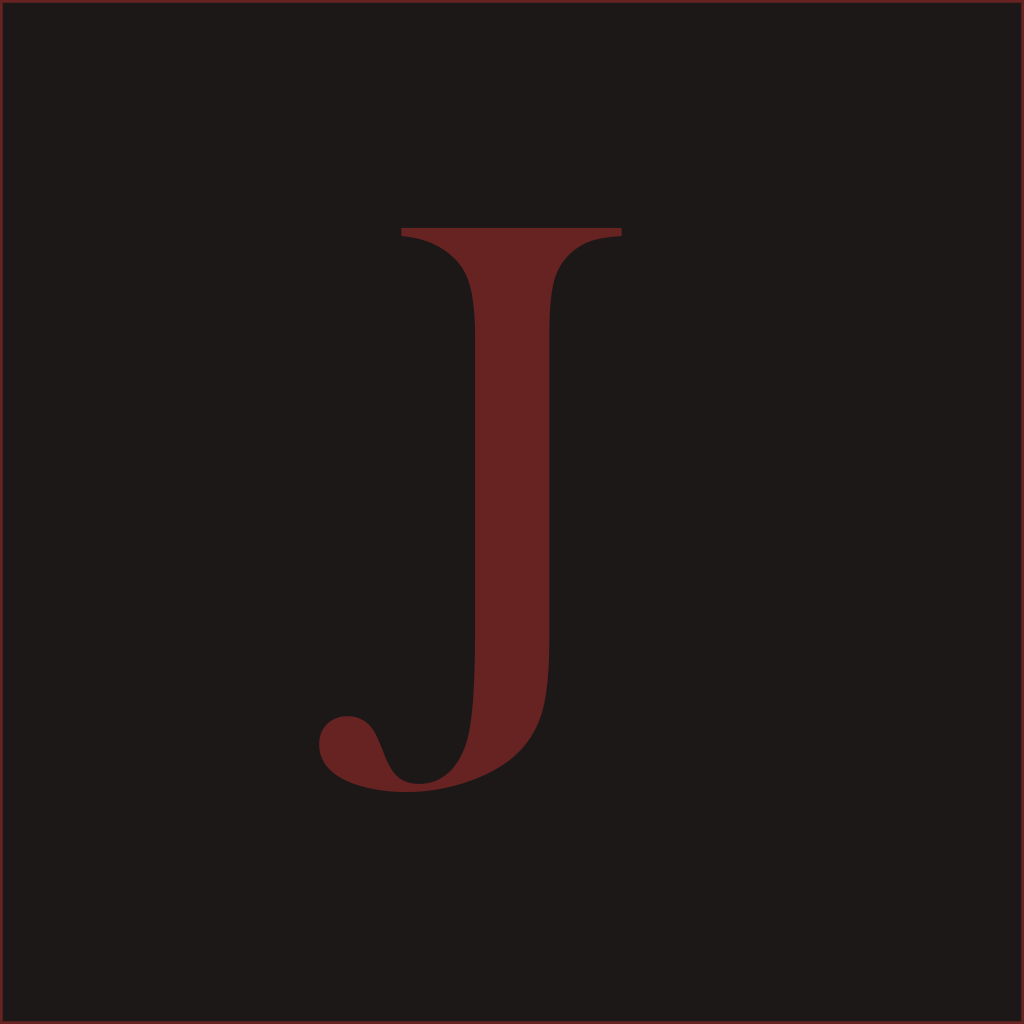
<style>
.page{position:relative;width:1024px;height:1024px;background:#1c1818}
.page>*{position:absolute;margin:0}
.t1{font:700px "BaskOldFace";color:#672222}
</style>
<div class="page">
<p class="t1" style="left:319px;top:227px;width:303px;height:565px">J</p>
</div>
